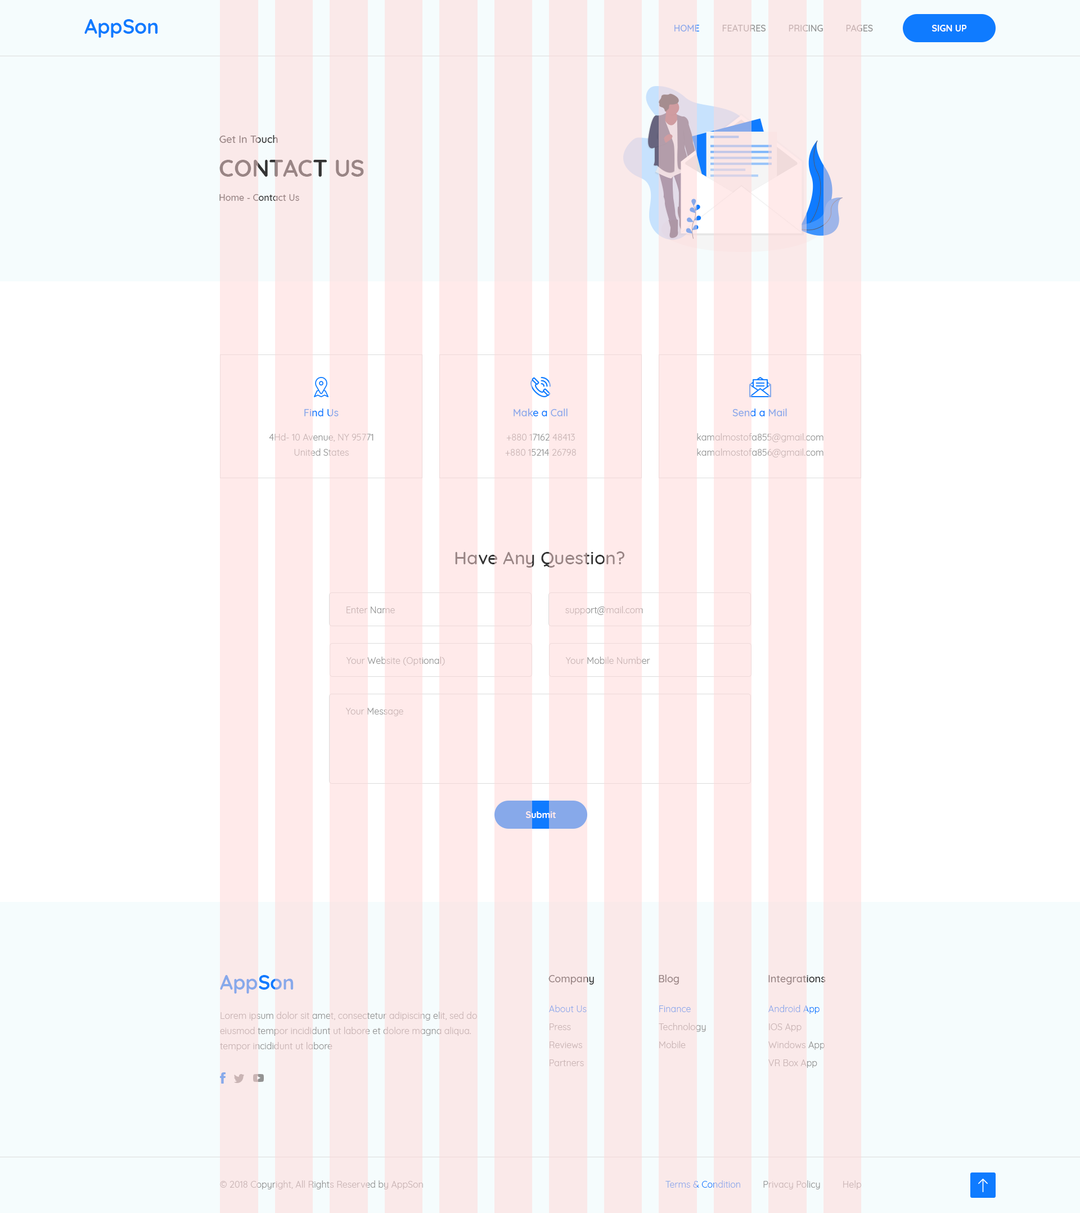
<style>
.page{position:relative;width:1080px;height:1213px;background:#ffffff}
.page>*{position:absolute;margin:0}
.t1{font:20.2px "Quicksand-Bold";color:#0f7bff}
.t2{font:9px "Quicksand-Medium";text-transform:uppercase}
.t3{font:9px "Quicksand-Bold";color:#ffffff}
.t4{font:10.1px "Quicksand-Medium";color:#998585}
.t5{font:23.6px "Quicksand-Bold";color:#998585;text-transform:uppercase}
.t6{font:9px "Quicksand-Medium";color:#998585}
.t7{font:10.1px "Quicksand-Medium"}
.t8{font:10.1px "Quicksand-Medium";color:#87a9ea}
.t9{font:9px/15.2px "Quicksand-Regular"}
.t10{font:9px/15.2px "Quicksand-Regular";color:#c9b4b4}
.t11{font:18px "Quicksand-Medium";color:#998585}
.t12{font:9px "Quicksand-Regular";color:#c9b4b4}
.t13{font:9px "Quicksand-Regular"}
.t14{font:20.2px "Quicksand-Bold";color:#87a9ea}
.t15{font:9px "Quicksand-Regular";color:#87a9ea}
</style>
<div class="page">
<p class="t1" style="left:84px;top:19px;width:74px;height:19px">AppSon</p>
<p class="t2" style="left:674px;top:25px;width:199px;height:7px">Home         Features         Pricing         Pages</p>
<p class="t3" style="left:932px;top:25px;width:35px;height:7px">SIGN UP</p>
<p class="t4" style="left:219px;top:135px;width:59px;height:8px">Get In Touch</p>
<p class="t5" style="left:219px;top:160px;width:145px;height:17px">Contact us</p>
<p class="t6" style="left:219px;top:194px;width:80px;height:7px">Home - Contact Us</p>
<p class="t7" style="left:304px;top:408px;width:35px;height:8px">Find Us</p>
<p class="t8" style="left:514px;top:408px;width:54px;height:8px">Make a Call</p>
<p class="t8" style="left:732px;top:408px;width:55px;height:8px">Send a Mail</p>
<p class="t9" style="left:269px;top:433px;width:105px;height:23px;text-align:center">4Hd- 10 Avenue, NY 95771<br>United States</p>
<p class="t10" style="left:505px;top:434px;width:71px;height:22px;text-align:center">+880 17162 48413<br>+880 15214 26798</p>
<p class="t9" style="left:697px;top:433px;width:127px;height:24px;text-align:center">kamalmostofa855@gmail.com<br>kamalmostofa856@gmail.com</p>
<p class="t11" style="left:455px;top:551px;width:169px;height:17px">Have Any Question?</p>
<p class="t12" style="left:565px;top:606px;width:78px;height:9px">support@mail.com</p>
<p class="t12" style="left:346px;top:606px;width:49px;height:7px">Enter Name</p>
<p class="t13" style="left:346px;top:656px;width:99px;height:9px">Your Website (Optional)</p>
<p class="t13" style="left:565px;top:656px;width:85px;height:8px">Your Mobile Number</p>
<p class="t13" style="left:345px;top:708px;width:58px;height:8px">Your Message</p>
<p class="t3" style="left:526px;top:811px;width:30px;height:7px">Submit</p>
<p class="t14" style="left:220px;top:975px;width:74px;height:18px">AppSon</p>
<p class="t4" style="left:548px;top:975px;width:46px;height:9px">Company</p>
<p class="t4" style="left:659px;top:974px;width:20px;height:10px">Blog</p>
<p class="t4" style="left:768px;top:975px;width:58px;height:9px">Integrations</p>
<p class="t9" style="left:220px;top:1011px;width:257px;height:40px">Lorem ipsum dolor sit amet, consectetur adipiscing elit, sed do eiusmod tempor incididunt ut labore et dolore magna aliqua. tempor incididunt ut labore</p>
<p class="t15" style="left:549px;top:1005px;width:38px;height:7px">About Us</p>
<p class="t15" style="left:659px;top:1005px;width:32px;height:7px">Finance</p>
<p class="t13" style="left:768px;top:1005px;width:52px;height:9px">Android App</p>
<p class="t12" style="left:550px;top:1023px;width:21px;height:7px">Press</p>
<p class="t12" style="left:659px;top:1023px;width:47px;height:9px">Technology</p>
<p class="t12" style="left:769px;top:1023px;width:33px;height:9px">IOS App</p>
<p class="t12" style="left:550px;top:1041px;width:32px;height:7px">Reviews</p>
<p class="t12" style="left:659px;top:1041px;width:27px;height:7px">Mobile</p>
<p class="t13" style="left:768px;top:1041px;width:57px;height:9px">Windows App</p>
<p class="t12" style="left:550px;top:1059px;width:34px;height:7px">Partners</p>
<p class="t12" style="left:768px;top:1059px;width:49px;height:9px">VR Box App</p>
<p class="t12" style="left:220px;top:1180px;width:203px;height:9px">© 2018 Copyright, All Rights Reserved by AppSon</p>
<p class="t13" style="left:665px;top:1180px;width:196px;height:9px">Terms &amp; Condition         Privacy Policy         Help</p>
</div>
